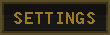
<style>
.page{position:relative;width:110px;height:35px;background:#181715}
.page>*{position:absolute;margin:0}
.t1{font:30px "Terminal";letter-spacing:0.01em;color:#9a7a25}
</style>
<div class="page">
<p class="t1" style="left:14px;top:12px;width:81px;height:12px">SETTINGS</p>
</div>
